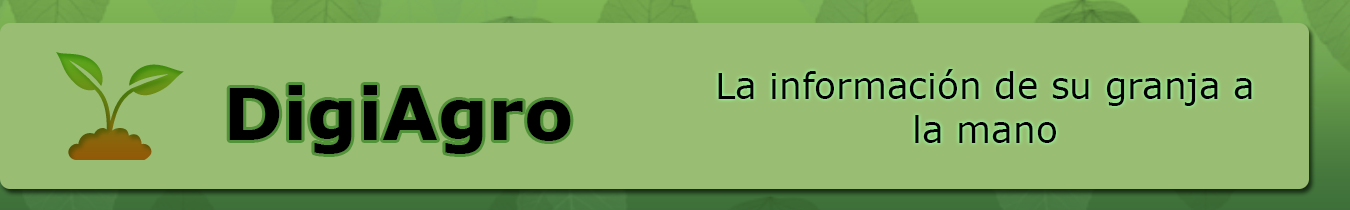
<style>
.page{position:relative;width:1350px;height:210px;background:#99bd73}
.page>*{position:absolute;margin:0}
.t1{font:36px "Verdana";color:#000000}
.t2{font:72px "Verdana-Bold";color:#000000}
</style>
<div class="page">
<p class="t1" style="left:718px;top:69px;width:534px;height:74px;text-align:center">La información de su granja a la mano</p>
<p class="t2" style="left:229px;top:85px;width:342px;height:69px">DigiAgro</p>
</div>
